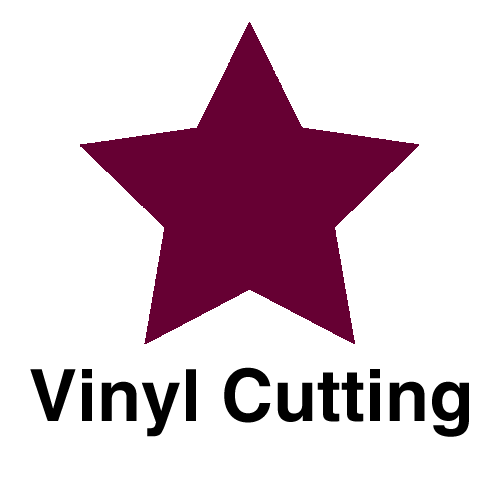
<style>
.page{position:relative;width:500px;height:500px;background:#ffffff}
.page>*{position:absolute;margin:0}
.t1{font:72px "Helvetica-Bold";color:#000000}
</style>
<div class="page">
<p class="t1" style="left:30px;top:367px;width:439px;height:70px">Vinyl Cutting</p>
</div>
